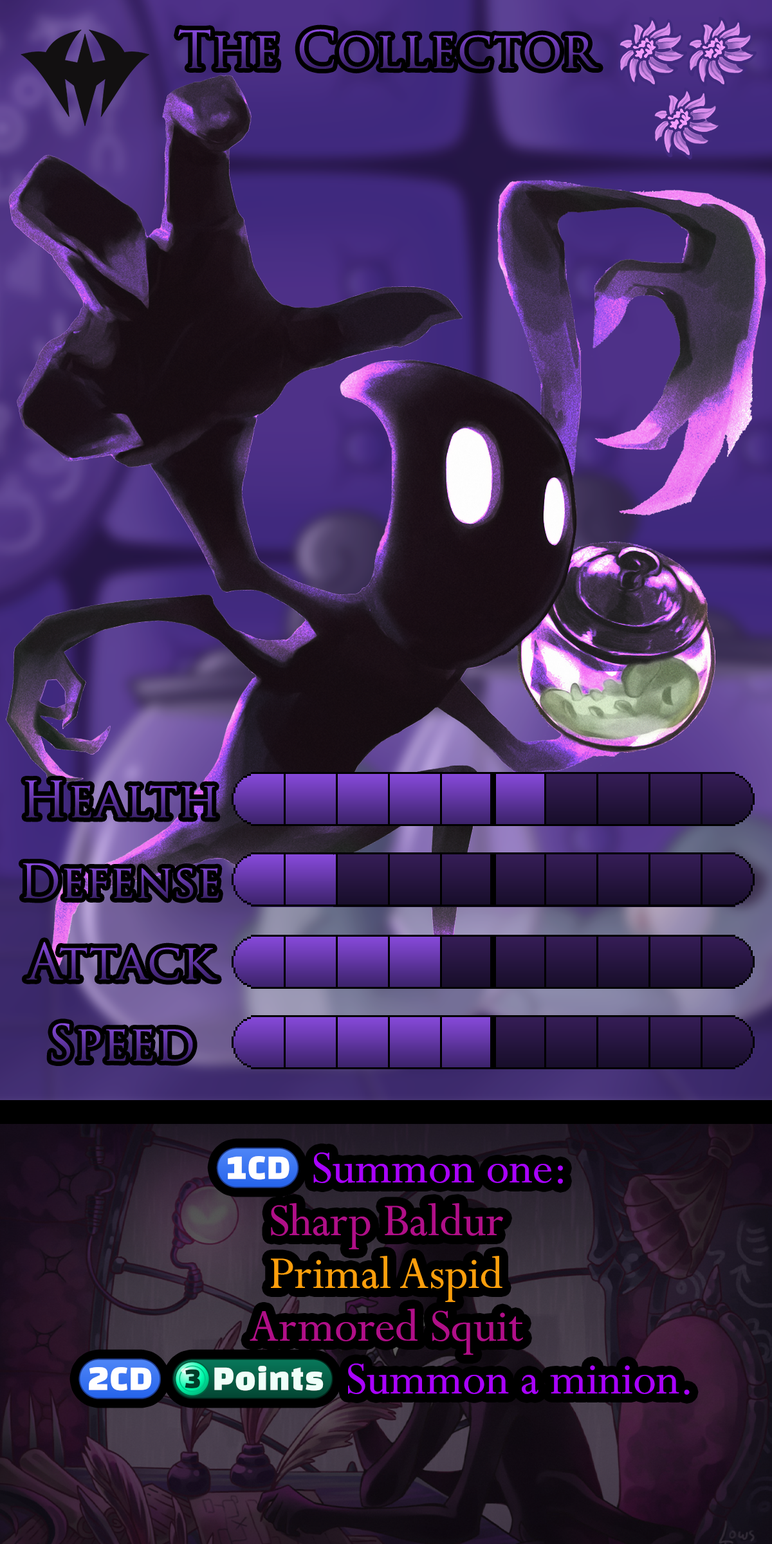
<style>
.page{position:relative;width:772px;height:1544px}
.page>*{position:absolute;margin:0}
.t1{font:86.2px "TrajanPro-Regular"}
.t2{font:83.6px "TrajanPro-Regular"}
.t3{font:78.5px "TrajanPro-Regular"}
.t4{font:86.9px/52.8px "Perpetua"}
.t5{font:70.7px/52.8px "stoogedings-Regular"}
.t6{font:70.7px/52.8px "stoogedings-Regular";letter-spacing:0.225em}
</style>
<div class="page">
<p class="t1" style="left:178px;top:29px;width:421px;height:40px">The Collector</p>
<p class="t2" style="left:25px;top:781px;width:191px;height:37px">Health</p>
<p class="t3" style="left:23px;top:864px;width:196px;height:35px">Defense</p>
<p class="t2" style="left:26px;top:942px;width:191px;height:39px">Attack</p>
<p class="t2" style="left:51px;top:1023px;width:142px;height:39px">Speed</p>
<p class="t4" style="left:79px;top:1147px;width:611px;height:253px;text-align:center"><span class="t5">(1CD)</span> Summon one:<br>Sharp Baldur<br>Primal Aspid<br>Armored Squit<br><span class="t6">(2CD)</span><span class="t5">(3 points)</span> Summon a minion.</p>
</div>
